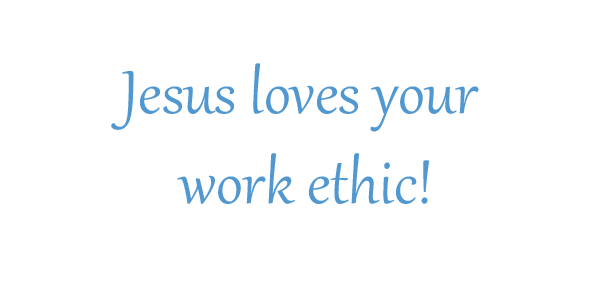
<style>
.page{position:relative;width:600px;height:300px;background:#ffffff}
.page>*{position:absolute;margin:0}
.t1{font:75px "Gabriola";color:#5098cf}
</style>
<div class="page">
<p class="t1" style="left:111px;top:63px;width:368px;height:141px;text-align:center">Jesus loves your <br>work ethic!</p>
</div>
